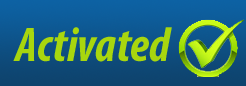
<style>
.page{position:relative;width:246px;height:86px}
.page>*{position:absolute;margin:0}
.t1{font:49px "MyriadPro-BoldCondIt";color:#a8d60e}
</style>
<div class="page">
<p class="t1" style="left:13px;top:27px;width:159px;height:35px">Activated</p>
</div>
